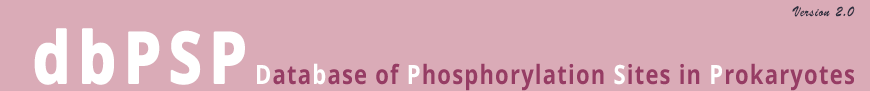
<style>
.page{position:relative;width:870px;height:91px;background:#daabb7}
.page>*{position:absolute;margin:0}
.t1{font:14.4px "BrushScriptStd";letter-spacing:0.055em;color:#2b2f3e;scale:0.83 1}
.t2{font:70.8px "OpenSans-Bold";letter-spacing:0.11em;color:#ffffff;font-weight:bold;scale:0.83 1}
.t3{font:26.4px "OpenSans-Bold";letter-spacing:0.055em;color:#963c64;scale:0.83 1}
.t4{font:26.4px "OpenSans-Bold";letter-spacing:0.055em;color:#ffffff;scale:0.83 1}
</style>
<div class="page">
<p class="t1" style="left:792px;top:6px;width:63px;height:11px">Version 2.0</p>
<p class="t2" style="left:34px;top:28px;width:211px;height:57px">dbPSP</p>
<p class="t3" style="left:257px;top:63px;width:597px;height:28px"><span class="t4">D</span>ata<span class="t4">b</span>ase of <span class="t4">P</span>hosphorylation <span class="t4">S</span>ites in <span class="t4">P</span>rokaryotes</p>
</div>
